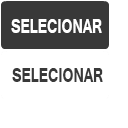
<style>
.page{position:relative;width:128px;height:128px;background:#ffffff}
.page>*{position:absolute;margin:0}
.t1{font:24.9px "Tunga-Bold";color:#ffffff;scale:0.71 1}
.t2{font:24.9px "Tunga-Bold";color:#393939;scale:0.71 1}
</style>
<div class="page">
<p class="t1" style="left:11px;top:19px;width:91px;height:14px">SELECIONAR</p>
<p class="t2" style="left:12px;top:68px;width:91px;height:14px">SELECIONAR</p>
</div>
